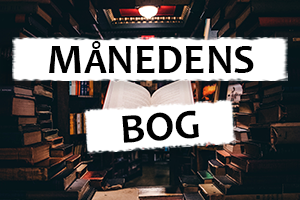
<style>
.page{position:relative;width:300px;height:200px;background:#ffffff}
.page>*{position:absolute;margin:0}
.t1{font:42px "Candara-Bold";color:#000000}
.t2{font:36px "Candara-Bold";color:#000000}
</style>
<div class="page">
<p class="t1" style="left:49px;top:41px;width:205px;height:32px">M<span class="t2">Å</span>NEDENS</p>
<p class="t1" style="left:122px;top:110px;width:77px;height:33px;rotate:-4deg">BOG</p>
</div>
